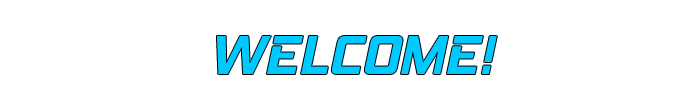
<style>
.page{position:relative;width:700px;height:100px;background:#ffffff}
.page>*{position:absolute;margin:0}
.t1{font:56px "HemiHeadRg-BoldItalic";color:#00c9ff}
</style>
<div class="page">
<p class="t1" style="left:217px;top:36px;width:280px;height:38px">WELCOME!</p>
</div>
